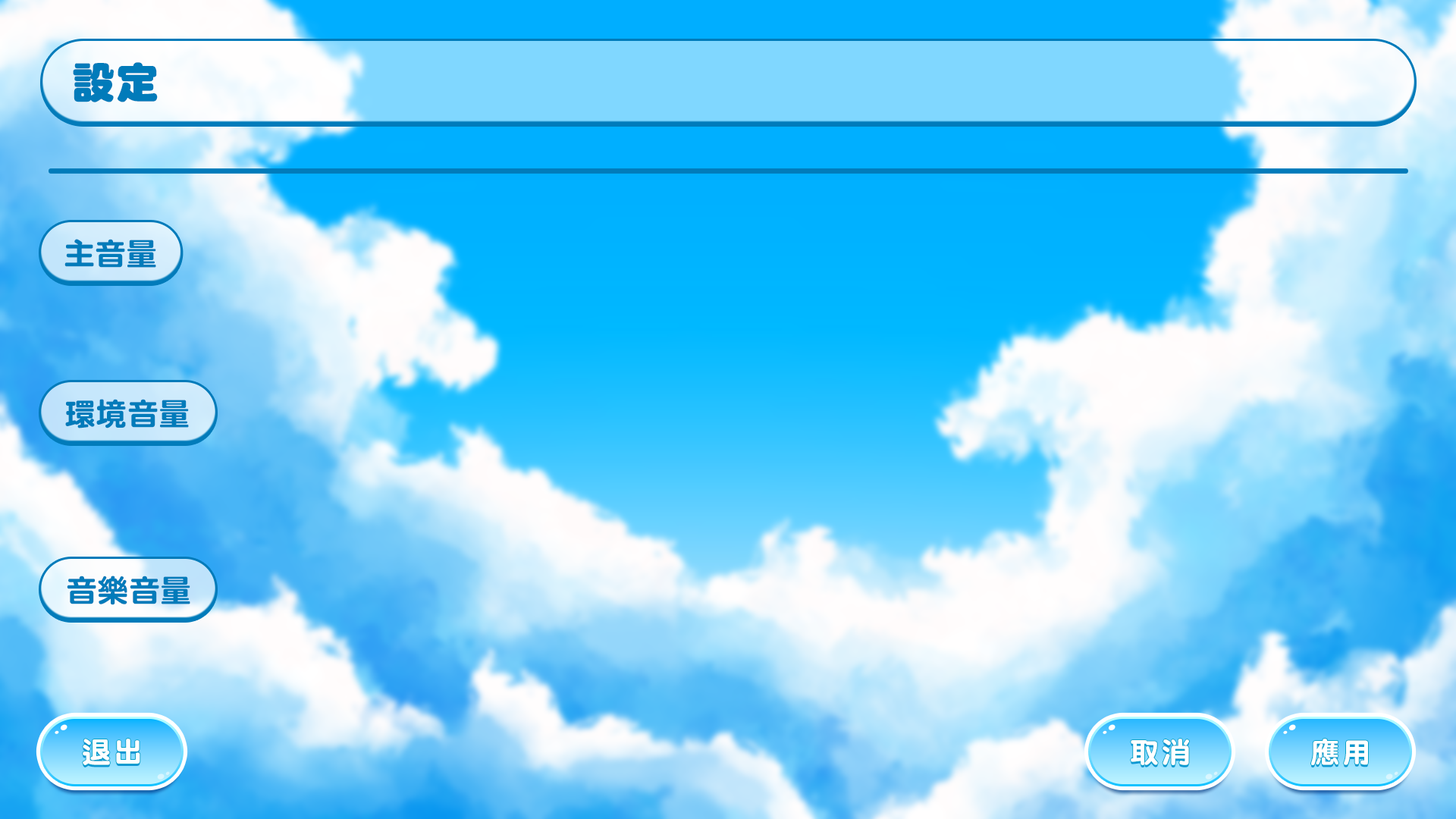
<style>
.page{position:relative;width:1456px;height:819px}
.page>*{position:absolute;margin:0}
.t1{font:44px "DFYuan-W12-WIN-BF";color:#017bba}
.t2{font:31.4px "DFNYuan-W9-WIN-BF";color:#017bba}
.t3{font:28.8px "DFNYuan-W9-WIN-BF";letter-spacing:0.12em;color:#ffffff}
</style>
<div class="page">
<p class="t1" style="left:73px;top:62px;width:85px;height:40px">設定</p>
<p class="t2" style="left:64px;top:239px;width:92px;height:29px">主音量</p>
<p class="t2" style="left:65px;top:399px;width:124px;height:29px">環境音量</p>
<p class="t2" style="left:67px;top:576px;width:123px;height:29px">音樂音量</p>
<p class="t3" style="left:83px;top:739px;width:57px;height:26px">退出</p>
<p class="t3" style="left:1131px;top:739px;width:58px;height:26px">取消</p>
<p class="t3" style="left:1311px;top:739px;width:57px;height:26px">應用</p>
</div>
